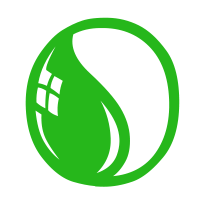
<style>
.page{position:relative;width:200px;height:200px;background:#ffffff}
.page>*{position:absolute;margin:0}
.t1{font:300px "KingthingsInkydinky-";color:#26b71b}
</style>
<div class="page">
<p class="t1" style="left:25px;top:17px;width:155px;height:170px">o</p>
</div>
